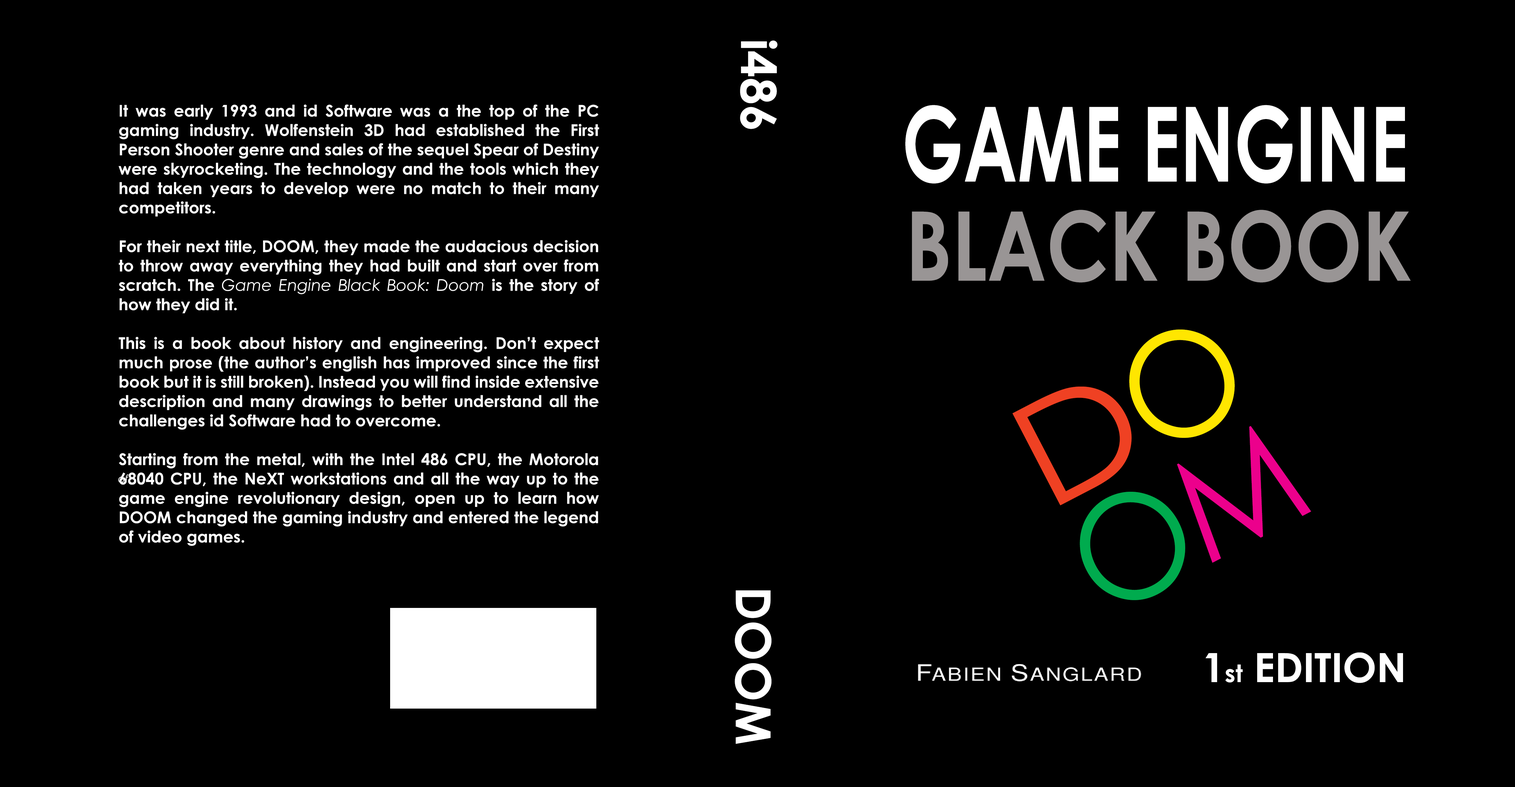
<style>
.page{position:relative;width:1515px;height:787px;background:#000000}
.page>*{position:absolute;margin:0}
.t1{font:48.4px "CenturyGothic-Bold";color:#ffffff}
.t2{font:16.1px "CenturyGothic-Bold";color:#ffffff}
.t3{font:16.1px "CenturyGothic-Italic";color:#ffffff}
.t4{font:103.8px "CenturyGothic-Bold";color:#ffffff;scale:0.71 1}
.t5{font:96.2px "CenturyGothic-Bold";color:#999595;scale:0.83 1}
.t6{font:144.2px "CenturyGothic";color:#ffe600;scale:0.95 1}
.t7{font:144.2px "CenturyGothic";color:#ef4123;scale:1.14 1}
.t8{font:144.2px "CenturyGothic";color:#ec008c;scale:0.95 1}
.t9{font:10.8px "CenturyGothic-Italic";color:#ffffff}
.t10{font:144.2px "CenturyGothic";color:#00ab4e;scale:0.95 1}
.t11{font:40.3px "CenturyGothic-Bold";color:#ffffff}
.t12{font:24.2px "CenturyGothic-Bold";color:#ffffff}
</style>
<div class="page">
<p class="t1" style="left:740px;top:40px;width:38px;height:89px;rotate:90deg">i486</p>
<p class="t2" style="left:118px;top:105px;width:481px;height:441px;text-align:justify">It was early 1993 and id Software was a the top of the PC gaming industry. Wolfenstein 3D had established the First Person Shooter genre and sales of the sequel Spear of Destiny were skyrocketing. The technology and the tools which they had taken years to develop were no match to their many competitors.<br><br>For their next title, DOOM, they made the audacious decision to throw away everything they had built and start over from scratch. The <span class="t3">Game Engine Black Book: Doom</span> is the story of how they did it.<br><br>This is a book about history and engineering. Don’t expect much prose (the author’s english has improved since the first book but it is still broken). Instead you will find inside extensive description and many drawings to better understand all the challenges id Software had to overcome. <br><br>Starting from the metal, with the Intel 486 CPU, the Motorola 68040 CPU, the NeXT workstations and all the way up to the game engine revolutionary design, open up to learn how DOOM changed the gaming industry and entered the legend of video games.</p>
<p class="t4" style="left:905px;top:105px;width:500px;height:79px">GAME ENGINE</p>
<p class="t5" style="left:912px;top:210px;width:499px;height:73px">BLACK BOOK</p>
<p class="t6" style="left:1129px;top:329px;width:106px;height:109px;rotate:-27deg">O</p>
<p class="t7" style="left:1012px;top:387px;width:120px;height:118px;rotate:-27deg">D</p>
<p class="t8" style="left:1177px;top:426px;width:134px;height:137px;rotate:-27deg">M</p>
<p class="t9" style="left:118px;top:474px;width:11px;height:9px">of</p>
<p class="t10" style="left:1080px;top:492px;width:105px;height:108px;rotate:-27deg">O</p>
<p class="t1" style="left:735px;top:590px;width:37px;height:154px;rotate:90deg">DOOM</p>
<p class="t11" style="left:1206px;top:652px;width:197px;height:31px">1<span class="t12">st</span> EDITION</p>
</div>
